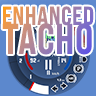
<style>
.page{position:relative;width:96px;height:96px}
.page>*{position:absolute;margin:0}
.t1{font:26.4px/29.2px "BebasNeuePro-ExpandedExtraBold";letter-spacing:0.02em;scale:0.83 1}
.t2{font:43.1px/29.2px "BebasNeuePro-ExpandedExtraBold";letter-spacing:0.02em;scale:0.83 1}
</style>
<div class="page">
<p class="t1" style="left:2px;top:6px;width:92px;height:49px;text-align:center">ENHANCED<br><span class="t2">TACHO</span></p>
</div>
